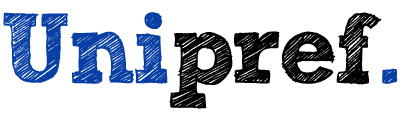
<style>
.page{position:relative;width:411px;height:118px;background:#ffffff}
.page>*{position:absolute;margin:0}
.t1{font:100px "freeversionSketchBlock-Bold";letter-spacing:-0.04em;color:#000000}
.t2{font:100px "freeversionSketchBlock-Bold";letter-spacing:-0.04em;color:#083fa4}
</style>
<div class="page">
<p class="t1" style="left:3px;top:12px;width:395px;height:97px"><span class="t2">Uni</span>pref<span class="t2">.</span></p>
</div>
